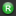
<style>
.page{position:relative;width:16px;height:16px;background:#333333}
.page>*{position:absolute;margin:0}
.t1{font:8px "DokChampa";color:#ffffff}
</style>
<div class="page">
<p class="t1" style="left:5px;top:5px;width:6px;height:7px">R</p>
</div>
